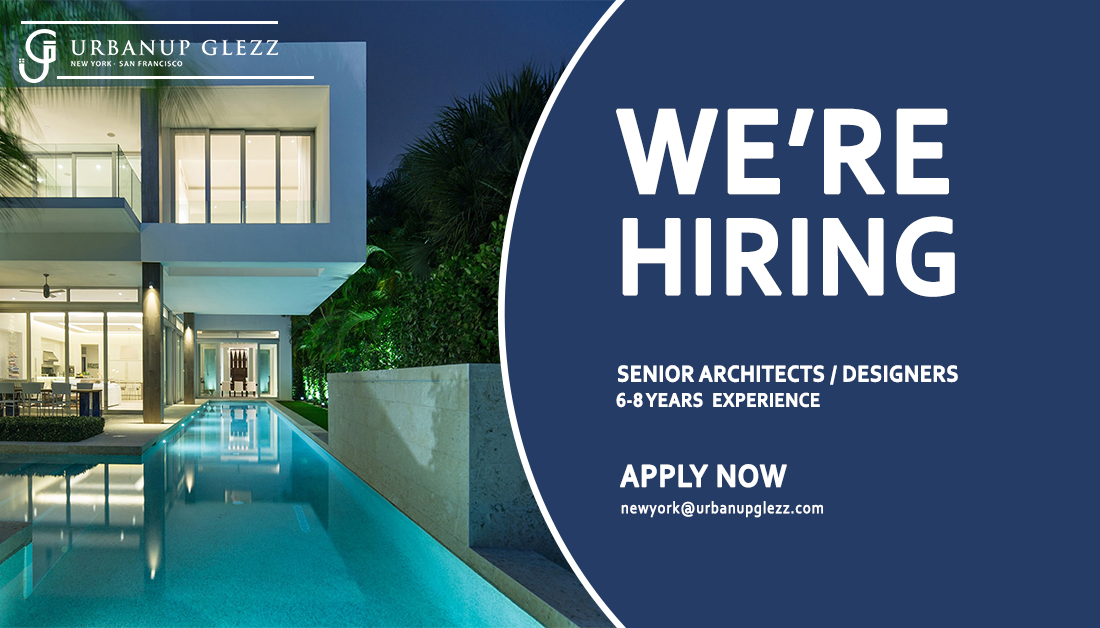
<style>
.page{position:relative;width:1100px;height:628px;background:#253c66}
.page>*{position:absolute;margin:0}
.t1{font:113.5px/101.4px "Corbel-Bold";color:#ffffff;font-weight:bold;scale:0.89 1}
.t2{font:125.3px/91.9px "Corbel-Bold";color:#ffffff;font-weight:bold;scale:0.89 1}
.t3{font:23.8px "Corbel-Bold";color:#ffffff;font-weight:bold;scale:0.89 1}
.t4{font:20.4px "Corbel-Bold";color:#ffffff;font-weight:bold;scale:0.89 1}
.t5{font:32.9px "Corbel-Bold";color:#ffffff;font-weight:bold;scale:0.89 1}
.t6{font:16.6px "Corbel";letter-spacing:0.04em;color:#ffffff;font-weight:bold;scale:0.89 1}
</style>
<div class="page">
<p class="t1" style="left:616px;top:108px;width:339px;height:189px"><span class="t2">WE’RE<br></span>HIRING</p>
<p class="t3" style="left:618px;top:365px;width:340px;height:20px">SENIOR ARCHITECTS / DESIGNERS</p>
<p class="t4" style="left:616px;top:392px;width:204px;height:16px">6-8 YEARS  EXPERIENCE</p>
<p class="t5" style="left:620px;top:464px;width:167px;height:24px">APPLY NOW</p>
<p class="t6" style="left:621px;top:501px;width:202px;height:17px">newyork@urbanupglezz.com</p>
</div>
